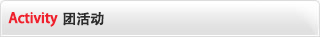
<style>
.page{position:relative;width:320px;height:37px}
.page>*{position:absolute;margin:0}
.t1{font:14px "AdobeHeitiStd-Regular";letter-spacing:-0.02em;color:#ef212e;font-weight:bold}
.t2{font:14px "AdobeHeitiStd-Regular";letter-spacing:-0.02em;color:#2c2c2c;font-weight:bold}
</style>
<div class="page">
<p class="t1" style="left:8px;top:12px;width:50px;height:15px">Activity</p>
<p class="t2" style="left:63px;top:12px;width:41px;height:14px">团活动</p>
</div>
